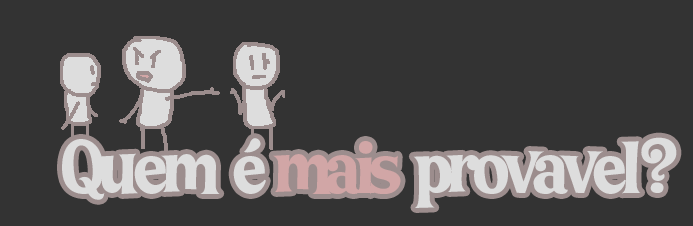
<style>
.page{position:relative;width:693px;height:226px;background:#333333}
.page>*{position:absolute;margin:0}
.t1{font:75.8px "LTFunk-Bold";letter-spacing:-0.08em;color:#dddddd}
.t2{font:75.8px "LTFunk-Bold";letter-spacing:-0.08em;color:#d1a6a6}
</style>
<div class="page">
<p class="t1" style="left:62px;top:137px;width:615px;height:71px">Quem   é  <span class="t2">mais   </span>provavel ?</p>
</div>
